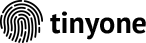
<style>
.page{position:relative;width:146px;height:43px;background:#ffffff}
.page>*{position:absolute;margin:0}
.t1{font:30px "PTSans-Bold";color:#010101}
</style>
<div class="page">
<p class="t1" style="left:50px;top:11px;width:96px;height:29px">tinyone</p>
</div>
